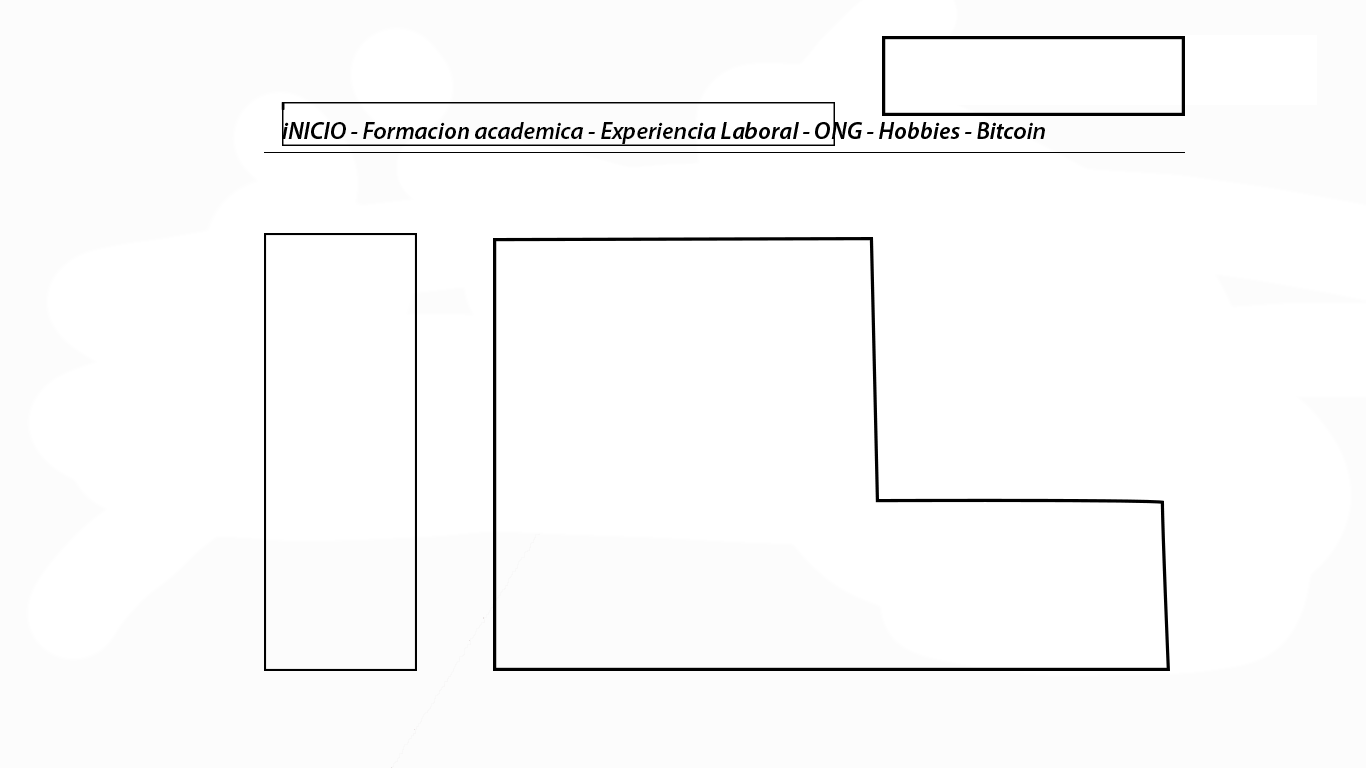
<style>
.page{position:relative;width:1366px;height:768px;background:#ffffff}
.page>*{position:absolute;margin:0}
.t1{font:24px "MyriadPro-SemiboldIt";color:#000000}
.t2{font:11px "PhatBoySlim-College";color:#000000}
</style>
<div class="page">
<p class="t1" style="left:281px;top:102px;width:764px;height:42px"><span class="t2">i<br></span>iNICIO - Formacion academica - Experiencia Laboral - ONG - Hobbies - Bitcoin</p>
</div>
